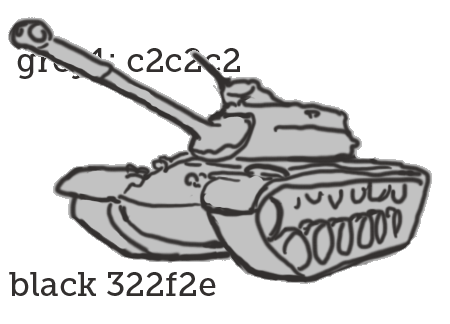
<style>
.page{position:relative;width:450px;height:324px;background:#ffffff}
.page>*{position:absolute;margin:0}
.t1{font:34px "MuseoSlab-500";color:#322f2e}
</style>
<div class="page">
<p class="t1" style="left:17px;top:48px;width:223px;height:31px">grey1: c2c2c2</p>
<p class="t1" style="left:9px;top:272px;width:207px;height:24px">black 322f2e</p>
</div>
